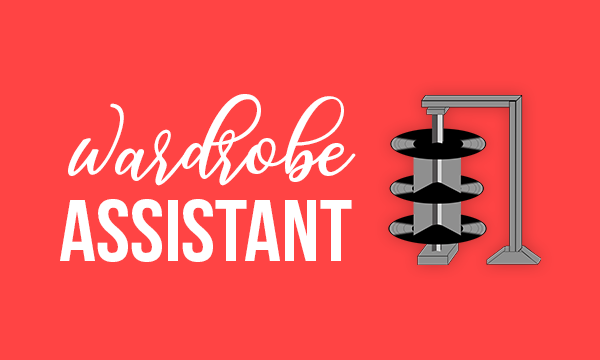
<style>
.page{position:relative;width:600px;height:360px;background:#ff4444}
.page>*{position:absolute;margin:0}
.t1{font:66.5px "magic-Regular";color:#ffffff;scale:1.04 1}
.t2{font:87.5px "BebasNeueBold";color:#ffffff;scale:1.04 1}
</style>
<div class="page">
<p class="t1" style="left:68px;top:94px;width:288px;height:92px">Wardrobe</p>
<p class="t2" style="left:60px;top:199px;width:292px;height:63px">Assistant</p>
</div>
